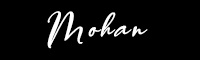
<style>
.page{position:relative;width:200px;height:60px;background:#000000}
.page>*{position:absolute;margin:0}
.t1{font:30px "valentinevibes";letter-spacing:0.09em;color:#ffffff;font-style:italic}
</style>
<div class="page">
<p class="t1" style="left:47px;top:11px;width:101px;height:38px">Mohan</p>
</div>
